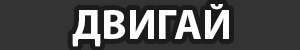
<style>
.page{position:relative;width:300px;height:50px;background:#333333}
.page>*{position:absolute;margin:0}
.t1{font:42.2px "MyriadPro-Bold";color:#ffffff}
</style>
<div class="page">
<p class="t1" style="left:72px;top:4px;width:157px;height:43px">ДВИГАЙ</p>
</div>
